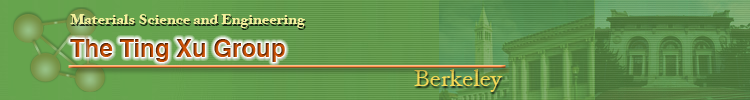
<style>
.page{position:relative;width:750px;height:100px}
.page>*{position:absolute;margin:0}
.t1{font:14px "HoeflerText-Black";color:#f4ef9d}
.t2{font:24px "Helvetica-Bold"}
.t3{font:24px "HoeflerText-Regular";color:#f3d756}
</style>
<div class="page">
<p class="t1" style="left:70px;top:14px;width:235px;height:14px">Materials Science and Engineering</p>
<p class="t2" style="left:70px;top:39px;width:215px;height:23px">The Ting Xu Group</p>
<p class="t3" style="left:414px;top:69px;width:89px;height:23px">Berkeley</p>
</div>
